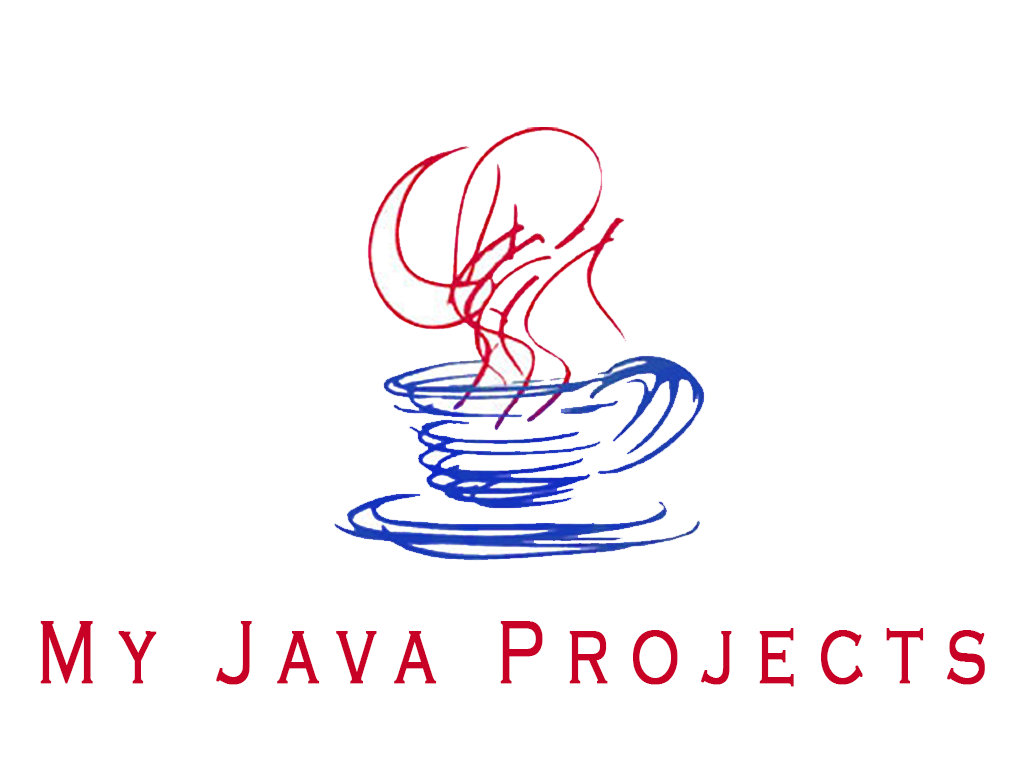
<style>
.page{position:relative;width:1024px;height:768px;background:#ffffff}
.page>*{position:absolute;margin:0}
.t1{font:91.7px "CopperplateGothic-Light";letter-spacing:0.32em;color:#c80026;font-weight:bold;scale:0.71 1}
</style>
<div class="page">
<p class="t1" style="left:40px;top:621px;width:945px;height:66px">My Java Projects</p>
</div>
